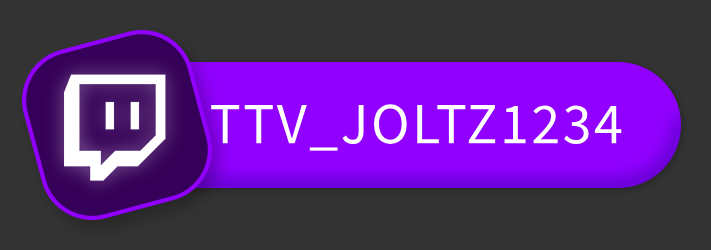
<style>
.page{position:relative;width:711px;height:250px;background:#333333}
.page>*{position:absolute;margin:0}
.t1{font:58.3px "Calibri";letter-spacing:0.04em;color:#ffffff;text-transform:uppercase}
</style>
<div class="page">
<p class="t1" style="left:211px;top:104px;width:411px;height:47px">ttv_joltz1234</p>
</div>
